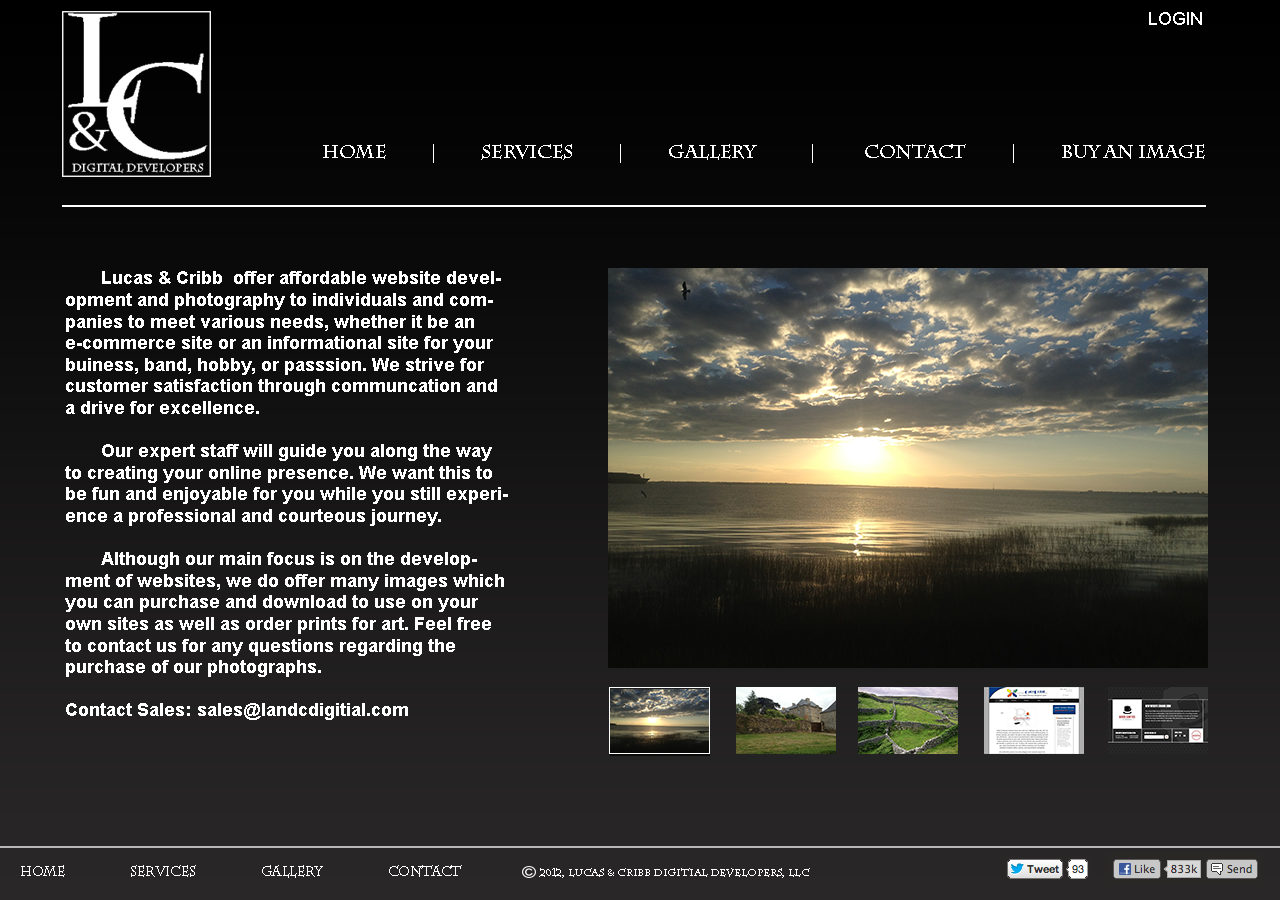
<style>
.page{position:relative;width:1280px;height:900px}
.page>*{position:absolute;margin:0}
.t1{font:18px "ArialMT";color:#ffffff}
.t2{font:18px "CharlemagneStd-Bold";color:#ffffff}
.t3{font:18px "Arial-BoldMT";color:#ffffff}
.t4{font:13px "CharlemagneStd-Bold";color:#ffffff}
.t5{font:10px "CharlemagneStd-Bold";color:#ffffff}
</style>
<div class="page">
<p class="t1" style="left:1149px;top:12px;width:53px;height:13px">LOGIN</p>
<p class="t2" style="left:323px;top:144px;width:882px;height:19px">home          |          services          |          gallery            |           contact          |          buy an image</p>
<p class="t3" style="left:65px;top:271px;width:443px;height:449px">Lucas &amp; Cribb  offer affordable website development and photography to individuals and companies to meet various needs, whether it be an e-commerce site or an informational site for your buiness, band, hobby, or passsion. We strive for customer satisfaction through communcation and a drive for excellence. <br><br> Our expert staff will guide you along the way to creating your online presence. We want this to be fun and enjoyable for you while you still experience a professional and courteous journey.<br><br> Although our main focus is on the development of websites, we do offer many images which you can purchase and download to use on your own sites as well as order prints for art. Feel free to contact us for any questions regarding the purchase of our photographs.<br><br>Contact Sales: sales@landcdigitial.com</p>
<p class="t4" style="left:21px;top:865px;width:789px;height:13px">home                    services                    gallery                    contact                        <span class="t5">2012, Lucas &amp; cribb digitial developers, llc</span></p>
</div>
